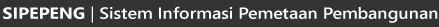
<style>
.page{position:relative;width:439px;height:27px;background:#333333}
.page>*{position:absolute;margin:0}
.t1{font:16px "SegoeUI-Semibold";color:#ffffff;scale:1.11 1}
.t2{font:16px "SegoeUI-Bold";color:#ffffff;scale:1.11 1}
.t3{font:16px "SegoeUI";color:#ffffff;scale:1.11 1}
</style>
<div class="page">
<p class="t1" style="left:3px;top:6px;width:435px;height:17px"><span class="t2">SIPEPENG</span><span class="t3"> | </span>Sistem Informasi Pemetaan Pembangunan</p>
</div>
